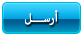
<style>
.page{position:relative;width:84px;height:36px}
.page>*{position:absolute;margin:0}
.t1{font:18px "AdobeArabic-Regular";color:#ffffff}
</style>
<div class="page">
<p class="t1" style="left:25px;top:10px;width:33px;height:15px">أرســـل</p>
</div>
